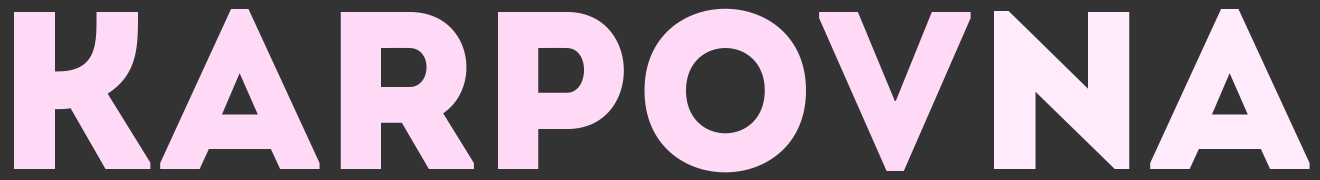
<style>
.page{position:relative;width:1320px;height:180px;background:#333333}
.page>*{position:absolute;margin:0}
.t1{font:225px "Intro";color:#fedaf6}
.t2{font:225px "Intro";color:#ffebfb}
</style>
<div class="page">
<p class="t1" style="left:14px;top:8px;width:1296px;height:165px">KARPOV<span class="t2">NA</span></p>
</div>
